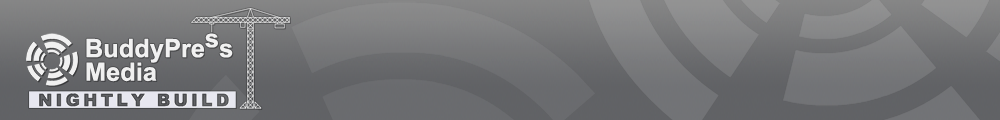
<style>
.page{position:relative;width:1000px;height:120px}
.page>*{position:absolute;margin:0}
.t1{font:25.4px "Arial-BoldMT";color:#ffffff}
</style>
<div class="page">
<p class="t1" style="left:86px;top:38px;width:147px;height:25px;opacity:0.9">BuddyPre  s</p>
<p class="t1" style="left:205px;top:33px;width:13px;height:15px;opacity:0.9">s</p>
<p class="t1" style="left:86px;top:62px;width:71px;height:20px;opacity:0.9">Media</p>
</div>
